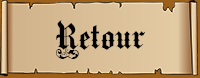
<style>
.page{position:relative;width:200px;height:78px}
.page>*{position:absolute;margin:0}
.t1{font:36.2px "MediciText";color:#000000}
</style>
<div class="page">
<p class="t1" style="left:56px;top:20px;width:89px;height:39px">Retour</p>
</div>
